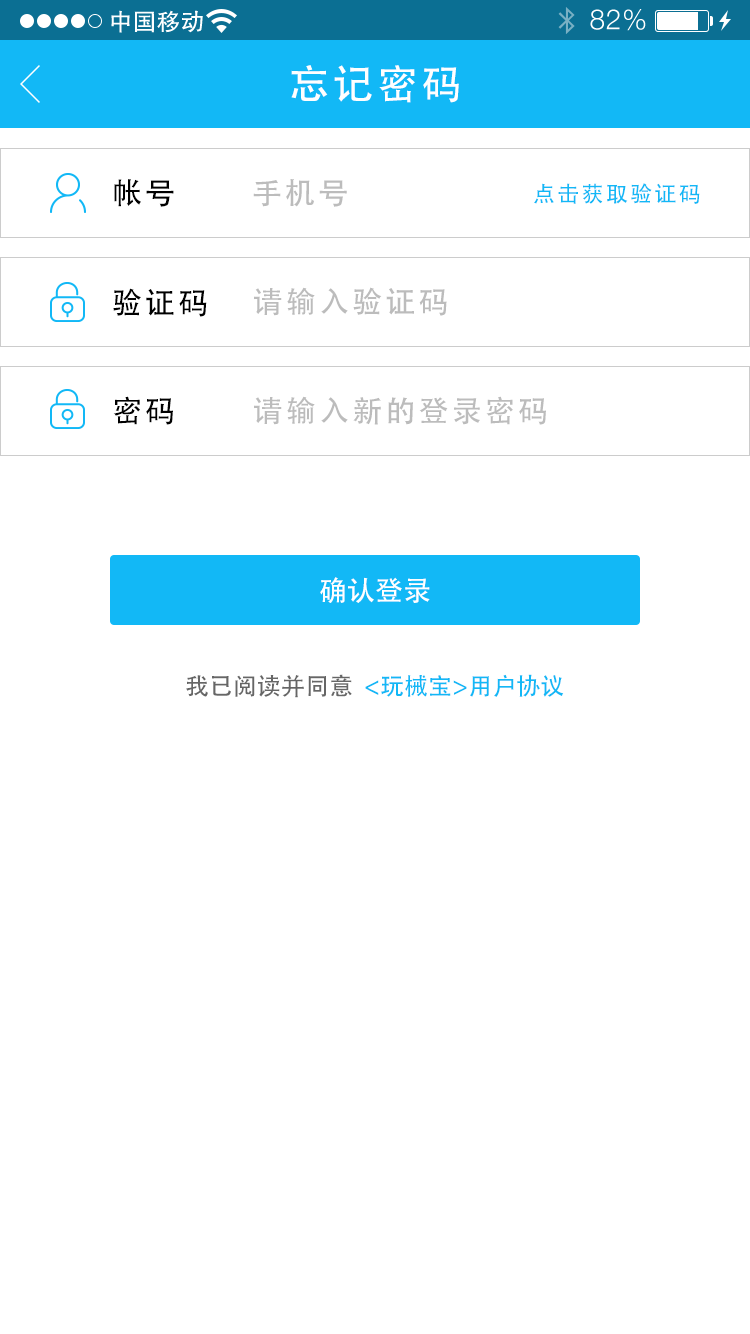
<style>
.page{position:relative;width:750px;height:1334px;background:#ffffff}
.page>*{position:absolute;margin:0}
.t1{font:40px "AdobeHeitiStd-Regular";letter-spacing:0.104em;color:#ffffff}
.t2{font:30px "AdobeHeitiStd-Regular";letter-spacing:0.104em;color:#000000}
.t3{font:30px "AdobeHeitiStd-Regular";letter-spacing:0.104em;color:#bcbcbc}
.t4{font:22px "AdobeHeitiStd-Regular";letter-spacing:0.104em;color:#12b8f6}
.t5{font:28px "AdobeHeitiStd-Regular";color:#ffffff}
.t6{font:24px "AdobeHeitiStd-Regular";color:#12b8f6}
.t7{font:24px "AdobeHeitiStd-Regular";color:#666666}
</style>
<div class="page">
<p class="t1" style="left:291px;top:65px;width:168px;height:38px">忘记密码</p>
<p class="t2" style="left:114px;top:179px;width:60px;height:28px">帐号</p>
<p class="t3" style="left:253px;top:179px;width:94px;height:28px">手机号</p>
<p class="t4" style="left:534px;top:183px;width:166px;height:21px">点击获取验证码</p>
<p class="t2" style="left:113px;top:288px;width:94px;height:29px">验证码</p>
<p class="t3" style="left:254px;top:287px;width:193px;height:29px">请输入验证码</p>
<p class="t2" style="left:113px;top:396px;width:60px;height:29px">密码</p>
<p class="t3" style="left:254px;top:396px;width:292px;height:29px">请输入新的登录密码</p>
<p class="t5" style="left:320px;top:577px;width:110px;height:26px">确认登录</p>
<p class="t6" style="left:186px;top:674px;width:378px;height:24px"><span class="t7">我已阅读并同意  </span>&lt;玩械宝&gt;用户协议</p>
</div>
